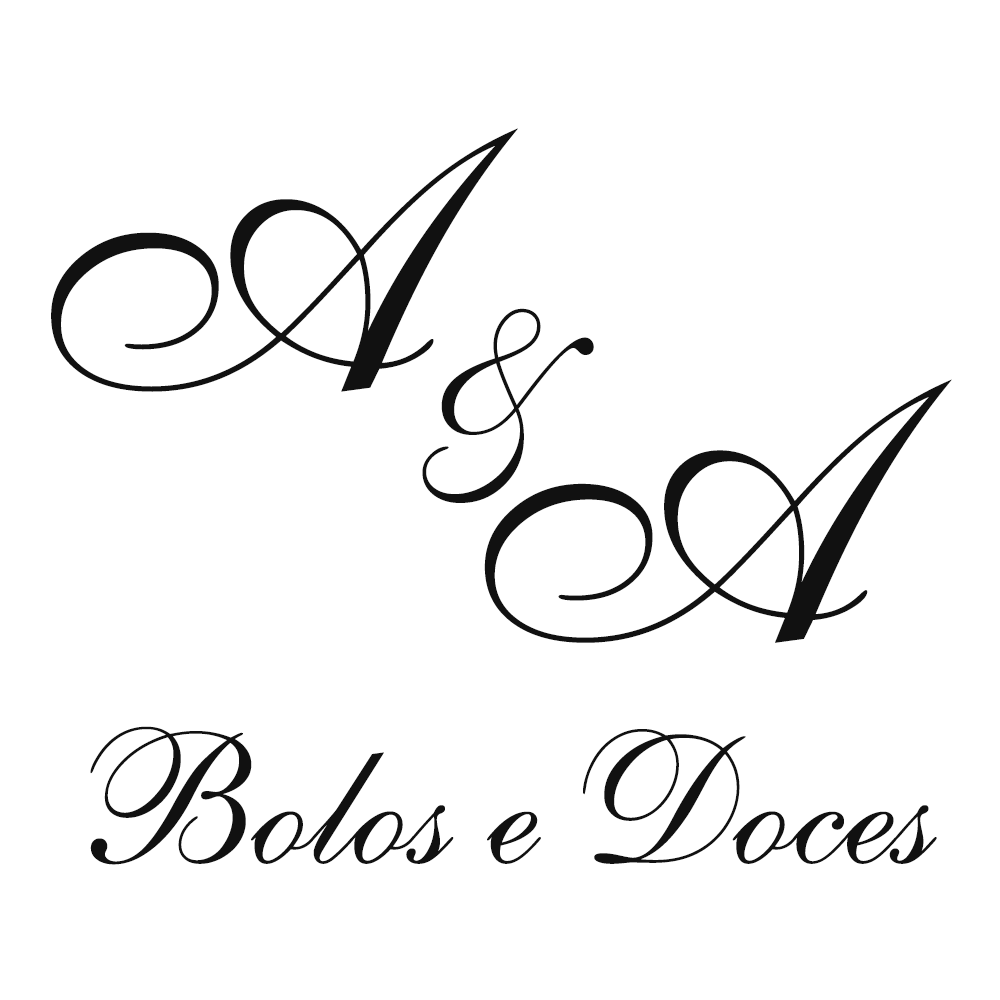
<style>
.page{position:relative;width:1000px;height:1000px;background:#ffffff}
.page>*{position:absolute;margin:0}
.t1{font:361.1px "English111VivaceBT-Regular";color:#111111}
.t2{font:222.2px "English111VivaceBT-Regular";color:#111111}
.t3{font:180.6px "English111VivaceBT-Regular";color:#111111}
</style>
<div class="page">
<p class="t1" style="left:51px;top:128px;width:467px;height:264px">A</p>
<p class="t2" style="left:422px;top:308px;width:172px;height:195px">&amp;</p>
<p class="t1" style="left:484px;top:379px;width:468px;height:264px">A</p>
<p class="t3" style="left:90px;top:726px;width:847px;height:139px">Bolos e Doces</p>
</div>
